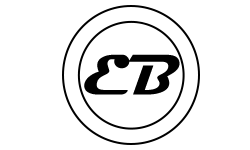
<style>
.page{position:relative;width:250px;height:150px;background:#ffffff}
.page>*{position:absolute;margin:0}
.t1{font:57.8px "Magneto-Bold";color:#000000}
</style>
<div class="page">
<p class="t1" style="left:84px;top:54px;width:96px;height:41px">EB</p>
</div>
